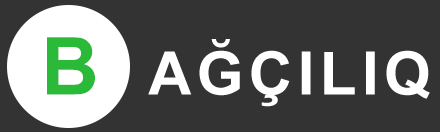
<style>
.page{position:relative;width:440px;height:132px;background:#333333}
.page>*{position:absolute;margin:0}
.t1{font:60px "Arial-BoldMT";letter-spacing:0.09em;color:#ffffff}
.t2{font:80px "Arial-BoldMT";letter-spacing:0.09em;color:#2ab939}
</style>
<div class="page">
<p class="t1" style="left:47px;top:37px;width:383px;height:70px"><span class="t2">B  </span>AĞÇILIQ</p>
</div>
